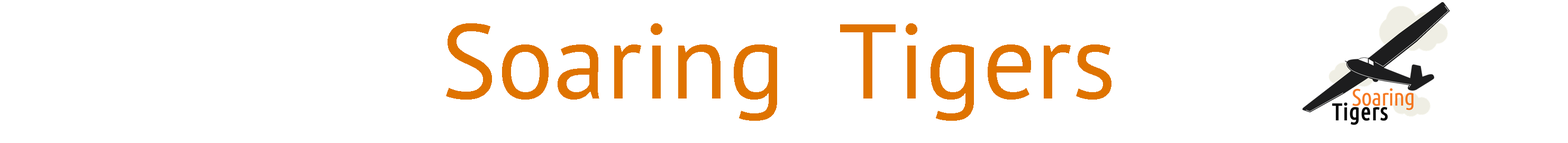
<style>
.page{position:relative;width:1568px;height:143px;background:#ffffff}
.page>*{position:absolute;margin:0}
.t1{font:105.8px "PTSans-Regular";color:#df7300}
</style>
<div class="page">
<p class="t1" style="left:446px;top:23px;width:665px;height:98px">Soaring  Tigers</p>
</div>
